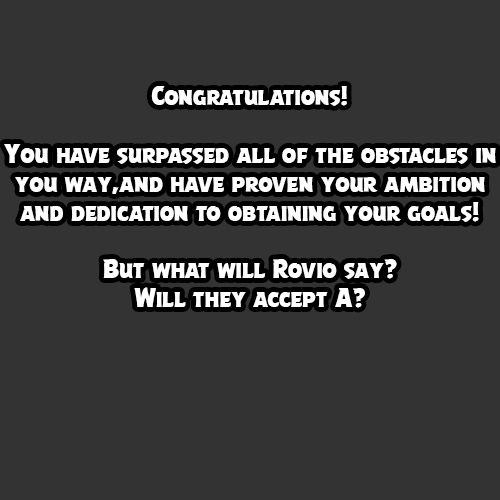
<style>
.page{position:relative;width:500px;height:500px;background:#333333}
.page>*{position:absolute;margin:0}
.t1{font:24px "ABFlockPoster";color:#ffffff}
</style>
<div class="page">
<p class="t1" style="left:4px;top:86px;width:492px;height:222px;text-align:center">Congratulations!<br><br>You have surpassed all of the obstacles in you way,and have proven your ambition and dedication to obtaining your goals!<br><br>But what will Rovio say?<br>Will they accept A?</p>
</div>
